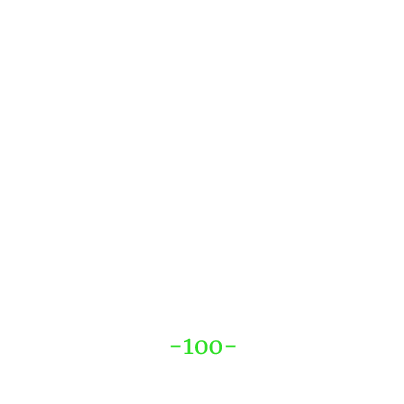
<style>
.page{position:relative;width:404px;height:404px;background:#ffffff}
.page>*{position:absolute;margin:0}
.t1{font:24px "Merriweather-Regular";color:#2edf26}
</style>
<div class="page">
<p class="t1" style="left:170px;top:338px;width:66px;height:17px">-1oo-</p>
</div>
